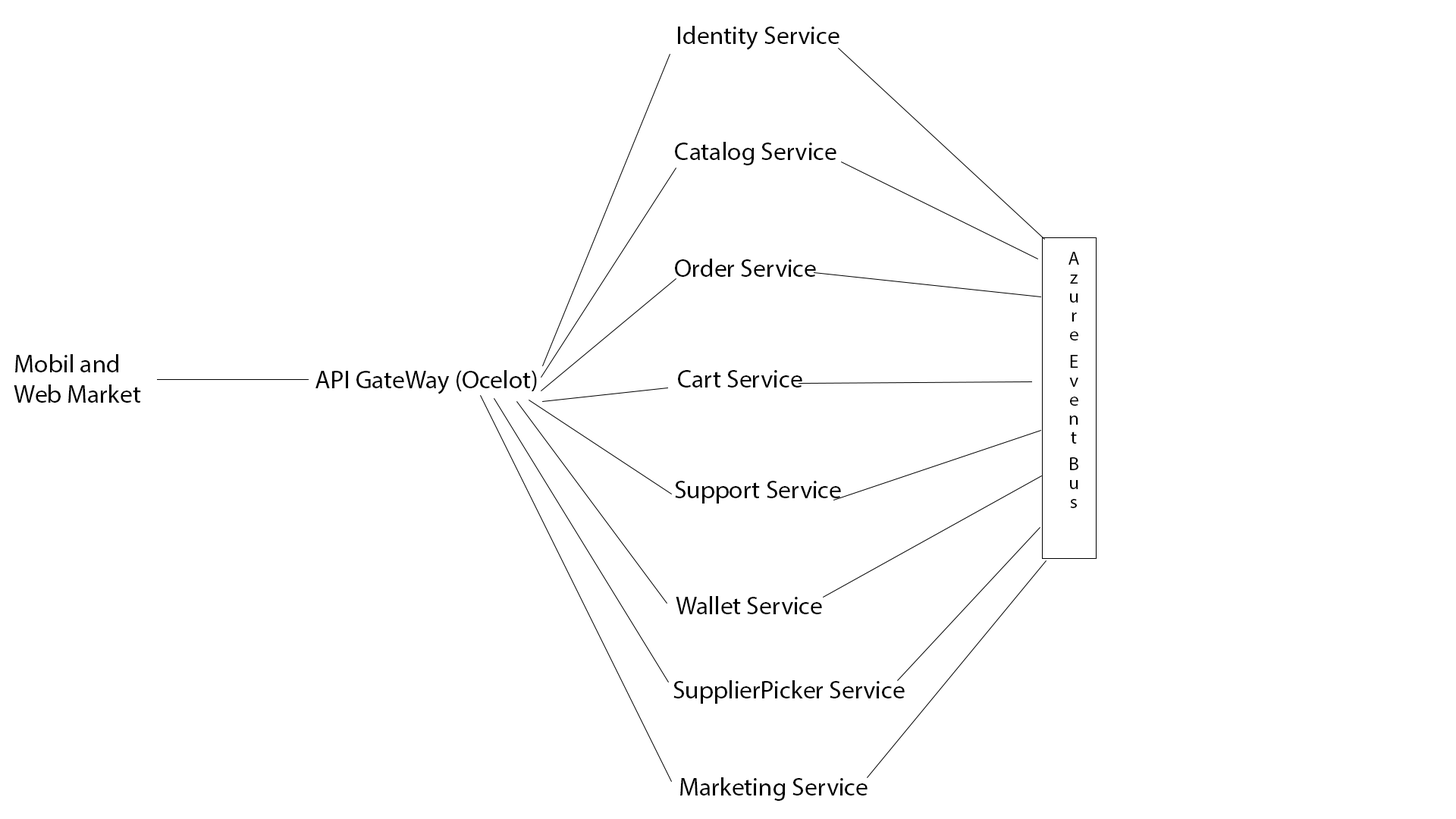
<style>
.page{position:relative;width:1456px;height:819px;background:#ffffff}
.page>*{position:absolute;margin:0}
.t1{font:25.3px "MyriadPro-Regular";color:#000000}
.t2{font:19px "MyriadPro-Regular";color:#000000}
</style>
<div class="page">
<p class="t1" style="left:678px;top:26px;width:161px;height:24px">Identity Service</p>
<p class="t1" style="left:675px;top:142px;width:161px;height:23px">Catalog Service</p>
<p class="t2" style="left:1068px;top:252px;width:11px;height:256px">Azure  Event  Bus</p>
<p class="t1" style="left:675px;top:259px;width:141px;height:18px">Order Service</p>
<p class="t1" style="left:14px;top:354px;width:127px;height:49px">Mobil and <br>Web Market</p>
<p class="t1" style="left:315px;top:370px;width:222px;height:24px">API GateWay (Ocelot)</p>
<p class="t1" style="left:678px;top:370px;width:124px;height:18px">Cart Service</p>
<p class="t1" style="left:675px;top:481px;width:166px;height:23px">Support Service</p>
<p class="t1" style="left:676px;top:596px;width:146px;height:18px">Wallet Service</p>
<p class="t1" style="left:673px;top:680px;width:232px;height:24px">SupplierPicker Service</p>
<p class="t1" style="left:680px;top:777px;width:188px;height:24px">Marketing Service</p>
</div>
